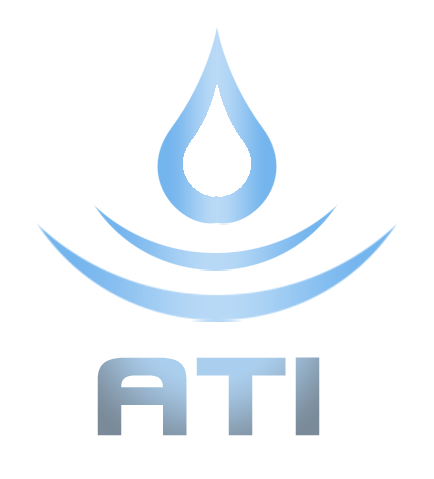
<style>
.page{position:relative;width:434px;height:479px;background:#ffffff}
.page>*{position:absolute;margin:0}
.t1{font:133.4px "Usuzi"}
</style>
<div class="page">
<p class="t1" style="left:97px;top:357px;width:223px;height:79px">ATI</p>
</div>
